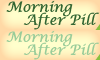
<style>
.page{position:relative;width:100px;height:60px}
.page>*{position:absolute;margin:0}
.t1{font:14px "LucidaCalligraphy-Italic";color:#336633}
.t2{font:14px "LucidaCalligraphy-Italic";color:#99cc99}
</style>
<div class="page">
<p class="t1" style="left:6px;top:0px;width:67px;height:17px">Morning</p>
<p class="t1" style="left:23px;top:12px;width:77px;height:18px">After Pill</p>
<p class="t2" style="left:6px;top:30px;width:67px;height:17px">Morning</p>
<p class="t2" style="left:23px;top:42px;width:77px;height:18px">After Pill</p>
</div>
